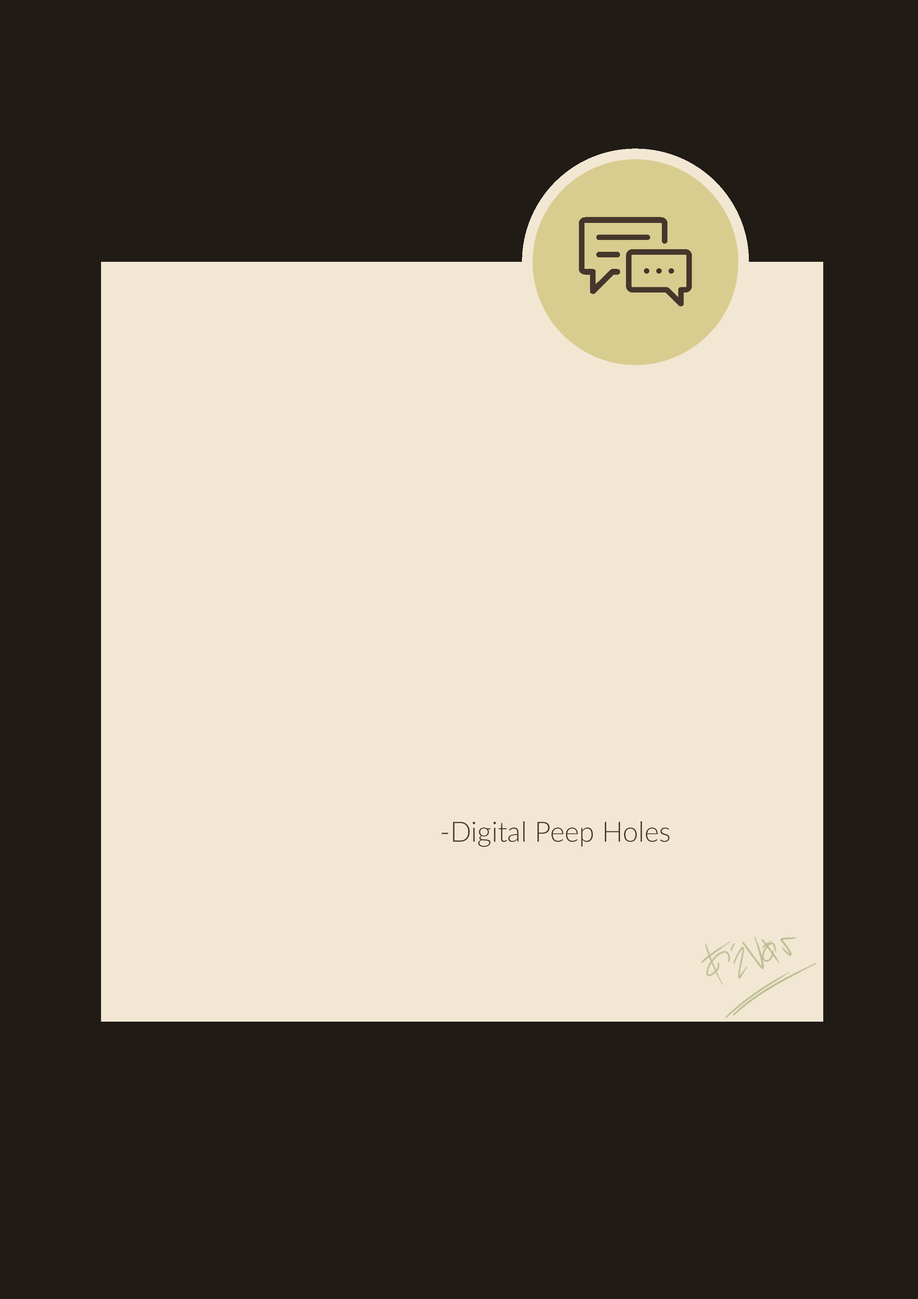
<style>
.page{position:relative;width:918px;height:1299px;background:#201b15}
.page>*{position:absolute;margin:0}
.t1{font:27.9px "Lato-Light";color:#44362b}
</style>
<div class="page">
<p class="t1" style="left:442px;top:821px;width:228px;height:26px">-Digital Peep Holes</p>
</div>
